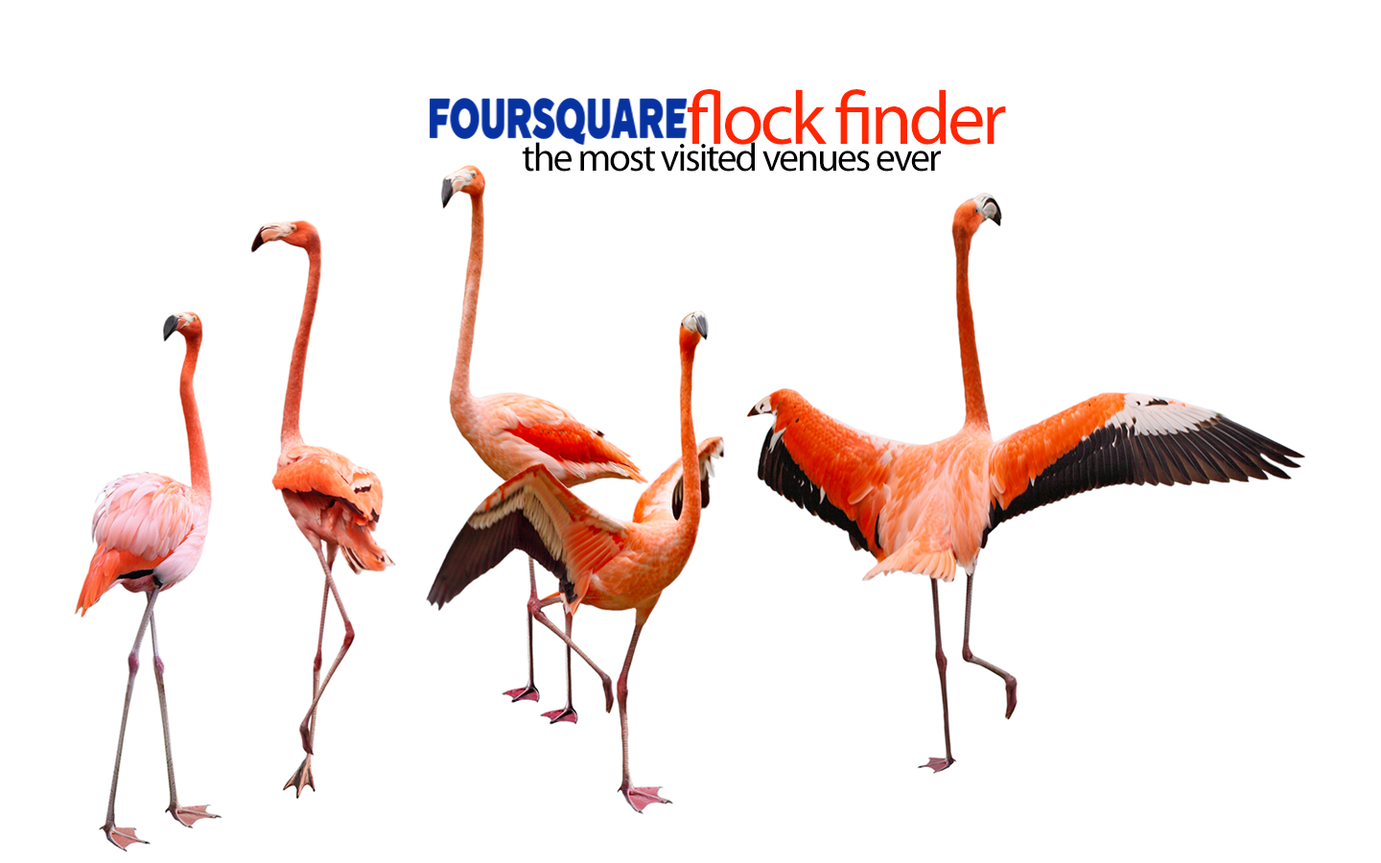
<style>
.page{position:relative;width:1381px;height:863px;background:#ffffff}
.page>*{position:absolute;margin:0}
.t1{font:75.9px "MyriadPro-Regular";letter-spacing:-0.05em;color:#ff2701}
.t2{font:40px "MyriadPro-Regular";letter-spacing:-0.05em;color:#000101}
</style>
<div class="page">
<p class="t1" style="left:687px;top:89px;width:319px;height:56px">flock finder</p>
<p class="t2" style="left:522px;top:142px;width:419px;height:30px">the most visited venues ever</p>
</div>
